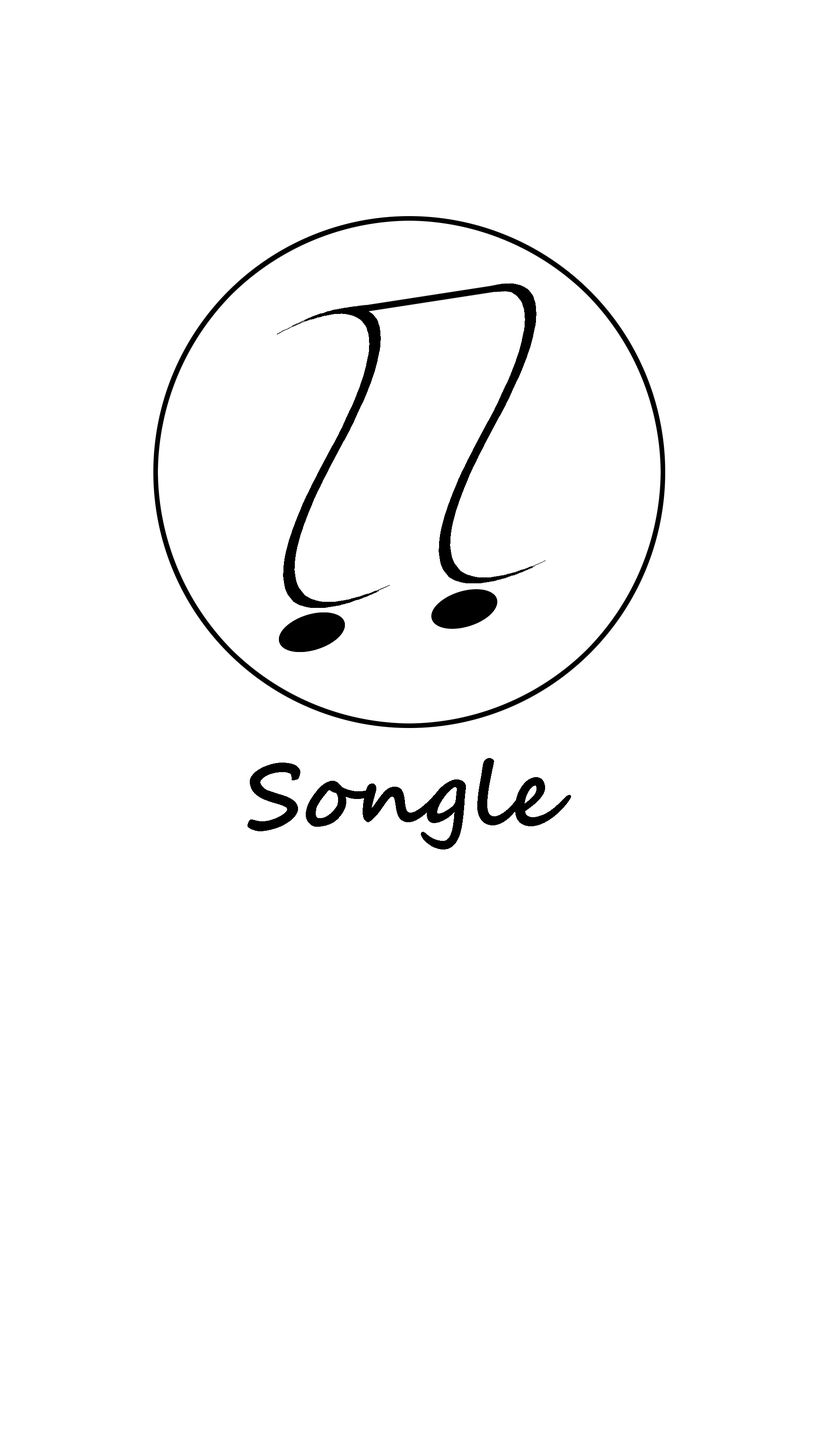
<style>
.page{position:relative;width:819px;height:1456px;background:#ffffff}
.page>*{position:absolute;margin:0}
.t1{font:91px "SegoeScript-Bold";color:#000000}
</style>
<div class="page">
<p class="t1" style="left:248px;top:758px;width:323px;height:91px">Songle</p>
</div>
